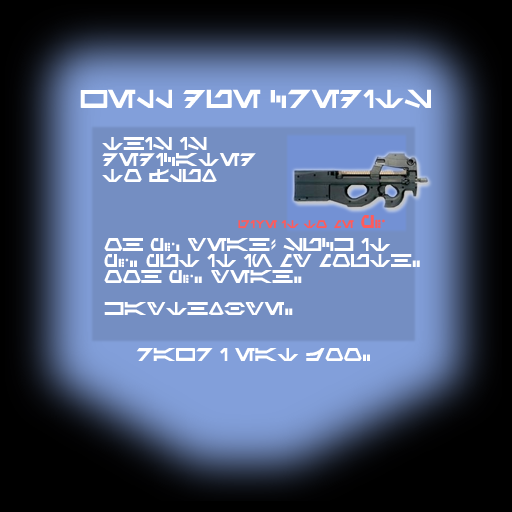
<style>
.page{position:relative;width:512px;height:512px}
.page>*{position:absolute;margin:0}
.t1{font:18.7px "Aurek-Besh";color:#ffffff}
.t2{font:13.3px "Aurek-Besh";color:#ffffff}
.t3{font:8px "Aurek-Besh";color:#ff5b5b}
.t4{font:13.3px "Aurek-Besh";color:#ff5b5b}
</style>
<div class="page">
<p class="t1" style="left:80px;top:89px;width:351px;height:19px">WELL DUE CREDITS</p>
<p class="t2" style="left:102px;top:137px;width:154px;height:45px">This is  <br>dedicated<br>to flux</p>
<p class="t3" style="left:238px;top:215px;width:147px;height:14px">give it to me<span class="t4"> p90</span></p>
<p class="t2" style="left:104px;top:238px;width:316px;height:77px">oh p90, yeah! SUCK IT <br>p90. Put it in my mouth.<br>ooh p90. Yeah.<br><br>Kaythxbye.</p>
<p class="t2" style="left:136px;top:348px;width:234px;height:13px">rawr I eat joo.</p>
</div>
